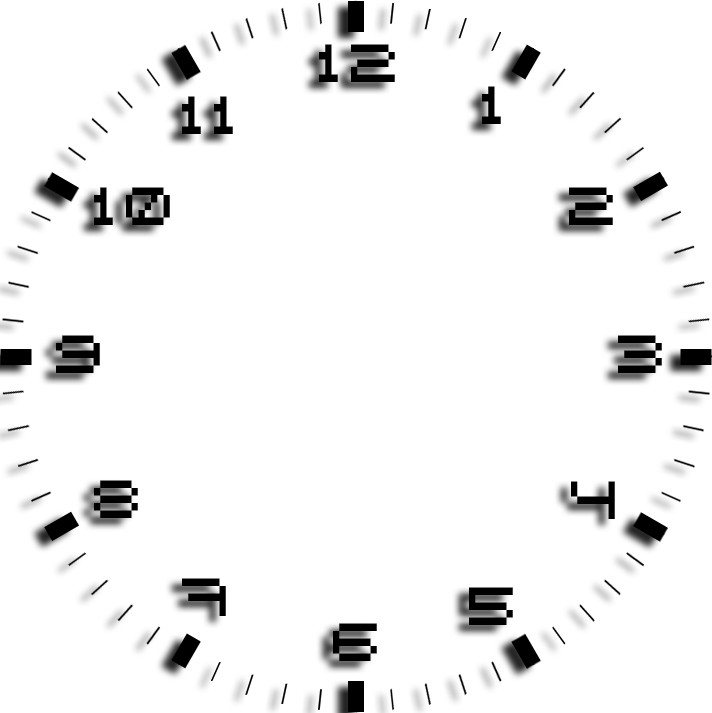
<style>
.page{position:relative;width:712px;height:713px;background:#ffffff}
.page>*{position:absolute;margin:0}
.t1{font:80px "Bit1";color:#000000}
</style>
<div class="page">
<p class="t1" style="left:319px;top:44px;width:76px;height:38px">12</p>
<p class="t1" style="left:482px;top:86px;width:19px;height:38px">1</p>
<p class="t1" style="left:182px;top:96px;width:51px;height:38px">11</p>
<p class="t1" style="left:94px;top:187px;width:76px;height:38px">10</p>
<p class="t1" style="left:569px;top:187px;width:44px;height:38px">2</p>
<p class="t1" style="left:56px;top:335px;width:44px;height:38px">9</p>
<p class="t1" style="left:618px;top:335px;width:44px;height:38px">3</p>
<p class="t1" style="left:94px;top:480px;width:44px;height:38px">8</p>
<p class="t1" style="left:571px;top:481px;width:44px;height:38px">4</p>
<p class="t1" style="left:182px;top:578px;width:44px;height:38px">7</p>
<p class="t1" style="left:469px;top:587px;width:44px;height:38px">5</p>
<p class="t1" style="left:333px;top:623px;width:44px;height:38px">6</p>
</div>
